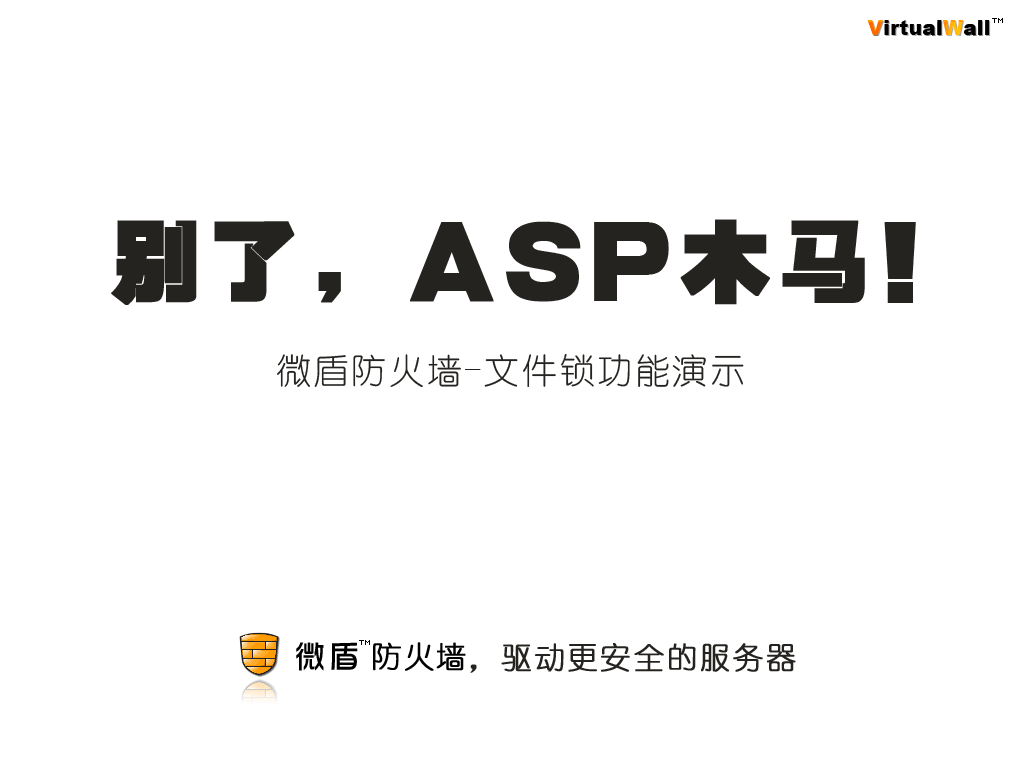
<style>
.page{position:relative;width:1024px;height:768px;background:#ffffff}
.page>*{position:absolute;margin:0}
.t1{font:90px "HYb4gj";letter-spacing:0.075em;color:#25231f;font-weight:bold}
.t2{font:35px "YouYuan";letter-spacing:0.075em;color:#25231f}
.t3{font:30px "YouYuan";letter-spacing:0.075em;color:#25231f;font-weight:bold}
</style>
<div class="page">
<p class="t1" style="left:111px;top:219px;width:805px;height:86px">别了，ASP木马！</p>
<p class="t2" style="left:277px;top:354px;width:467px;height:33px">微盾防火墙-文件锁功能演示</p>
<p class="t3" style="left:470px;top:643px;width:326px;height:30px">，驱动更安全的服务器</p>
</div>
